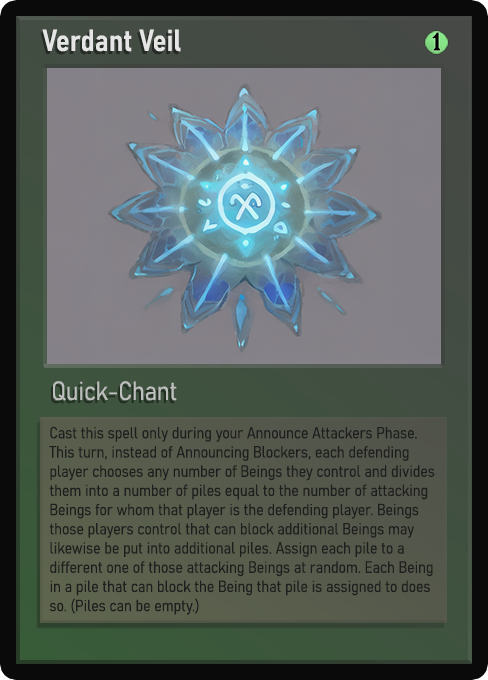
<style>
.page{position:relative;width:488px;height:680px}
.page>*{position:absolute;margin:0}
.t1{font:30px "Bahnschrift-SemiBoldSemiCondensed";color:#f2f2f2;font-weight:bold}
.t2{font:25px "WTRRoycroft";color:#000000;font-weight:bold;scale:1.09 1}
.t3{font:26px "Bahnschrift-LightSemiCondensed";color:#c8c8c8;font-weight:bold}
.t4{font:16px "Bahnschrift-LightSemiCondensed";color:#1e1e1e;font-weight:bold}
</style>
<div class="page">
<p class="t1" style="left:42px;top:29px;width:139px;height:23px;opacity:0.9">Verdant Veil</p>
<p class="t2" style="left:432px;top:32px;width:9px;height:19px">1</p>
<p class="t3" style="left:53px;top:381px;width:124px;height:20px;opacity:0.9">Quick-Chant</p>
<p class="t4" style="left:49px;top:426px;width:386px;height:189px">Cast this spell only during your Announce Attackers Phase. This turn, instead of Announcing Blockers, each defending player chooses any number of Beings they control and divides them into a number of piles equal to the number of attacking Beings for whom that player is the defending player. Beings those players control that can block additional Beings may likewise be put into additional piles. Assign each pile to a different one of those attacking Beings at random. Each Being in a pile that can block the Being that pile is assigned to does so. (Piles can be empty.)</p>
</div>
